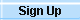
<style>
.page{position:relative;width:80px;height:20px;background:#bbdffc}
.page>*{position:absolute;margin:0}
.t1{font:12px "Arial-BoldMT";color:#101010}
</style>
<div class="page">
<p class="t1" style="left:19px;top:6px;width:42px;height:11px">Sign Up</p>
</div>
